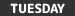
<style>
.page{position:relative;width:75px;height:16px;background:#333333}
.page>*{position:absolute;margin:0}
.t1{font:12.5px "RoundedMplus1c-ExtraBold";color:#ffffff}
</style>
<div class="page">
<p class="t1" style="left:10px;top:3px;width:55px;height:11px">TUESDAY</p>
</div>
